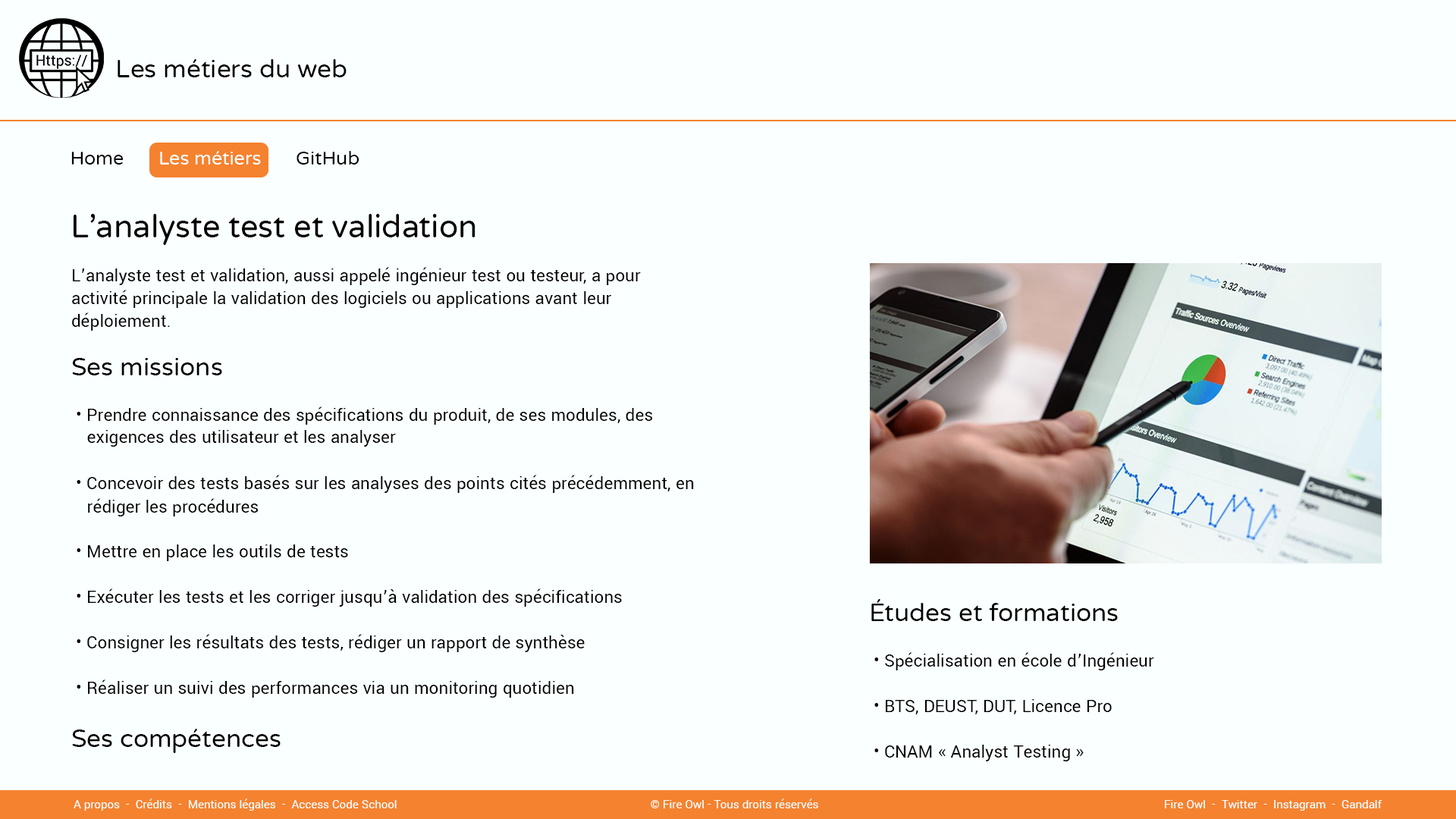
<style>
.page{position:relative;width:1456px;height:819px;background:#faffff}
.page>*{position:absolute;margin:0}
.t1{font:25.3px "VarelaRound-Regular";color:#000000}
.t2{font:19px "VarelaRound-Regular";color:#faffff}
.t3{font:19px "VarelaRound-Regular";color:#000000}
.t4{font:31.6px "VarelaRound-Regular";color:#000000}
.t5{font:19px "Yantramanav-Regular";color:#000000}
.t6{font:25.3px "MyriadPro-Regular";color:#000000}
.t7{font:12.6px "Yantramanav-Regular";color:#faffff}
</style>
<div class="page">
<p class="t1" style="left:118px;top:59px;width:229px;height:18px">Les métiers du web</p>
<p class="t2" style="left:71px;top:151px;width:288px;height:14px"><span class="t3">Home       </span>Les métiers<span class="t3">       GitHub</span></p>
<p class="t4" style="left:74px;top:214px;width:401px;height:31px">L’analyste test et validation</p>
<p class="t5" style="left:72px;top:267px;width:569px;height:64px">L’analyste test et validation, aussi appelé ingénieur test ou testeur, a pour activité principale la validation des logiciels ou applications avant leur déploiement.</p>
<p class="t5" style="left:72px;top:358px;width:622px;height:395px"><span class="t1">Ses missions<br><br></span> • Prendre connaissance des spécifications du produit, de ses modules, des   <br><br><br> • Concevoir des tests basés sur les analyses des points cités précédemment, en            <br><br><br> • Mettre en place les outils de tests<br><br> • Exécuter les tests et les corriger jusqu’à validation des spécifications<br><br> • Consigner les résultats des tests, rédiger un rapport de synthèse<br><br> • Réaliser un suivi des performances via un monitoring quotidien<br><br><span class="t1">Ses compétences<br><br><br><br></span><span class="t6"><br>Salaire</span></p>
<p class="t5" style="left:87px;top:430px;width:309px;height:17px">exigences des utilisateur et les analyser analyser</p>
<p class="t5" style="left:88px;top:498px;width:171px;height:18px">rédiger les procédures</p>
<p class="t7" style="left:74px;top:799px;width:323px;height:12px">A propos  -  Crédits  -  Mentions légales  -  Access Code School</p>
<p class="t7" style="left:651px;top:799px;width:167px;height:9px">© Fire Owl - Tous droits réservés</p>
<p class="t7" style="left:1165px;top:800px;width:217px;height:11px">Fire Owl  -  Twitter  -  Instagram  -  Gandalf</p>
</div>
